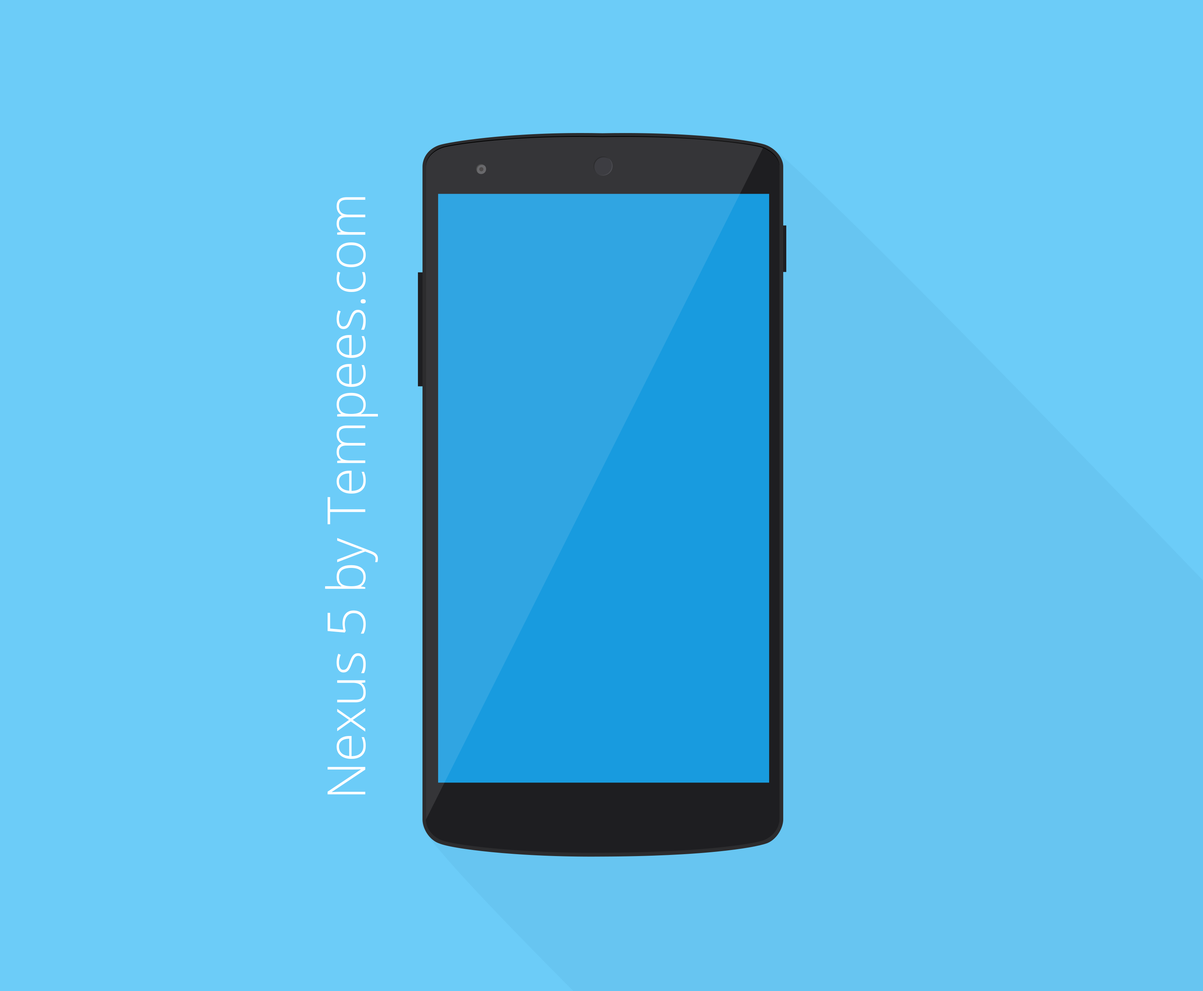
<style>
.page{position:relative;width:1203px;height:991px;background:#6cccf8}
.page>*{position:absolute;margin:0}
.t1{font:52.8px "OpenSans-Light";color:#ffffff}
</style>
<div class="page">
<p class="t1" style="left:325px;top:197px;width:53px;height:598px;rotate:-90deg">Nexus 5 by Tempees.com</p>
</div>
